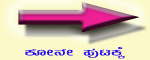
<style>
.page{position:relative;width:150px;height:60px;background:#fbf9c7}
.page>*{position:absolute;margin:0}
.t1{font:14px "Kuvempu_Eng_0005";color:#280df1;scale:1.5 1}
.t2{font:18px "Kuvempu_Eng_0005";color:#280df1;scale:1.5 1}
</style>
<div class="page">
<p class="t1" style="left:25px;top:47px;width:100px;height:12px">PÉÆÃ£ÉÃ ¥ÀÅlP<span class="t2">ÉÌ</span></p>
</div>
